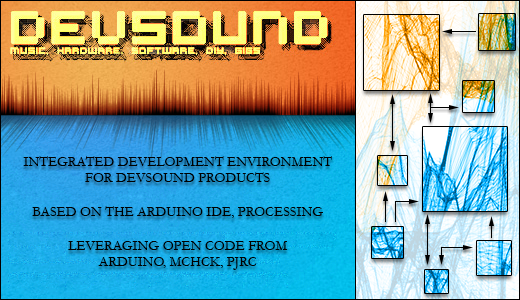
<style>
.page{position:relative;width:520px;height:300px}
.page>*{position:absolute;margin:0}
.t1{font:14px "Garamond";color:#000000}
</style>
<div class="page">
<p class="t1" style="left:23px;top:156px;width:309px;height:114px;text-align:center">INTEGRATED DEVELOPMENT ENVIRONMENT<br>FOR DEVSOUND PRODUCTS<br><br>BASED ON THE ARDUINO IDE, PROCESSING<br><br>LEVERAGING OPEN CODE FROM<br>ARDUINO, MCHCK, PJRC</p>
</div>
